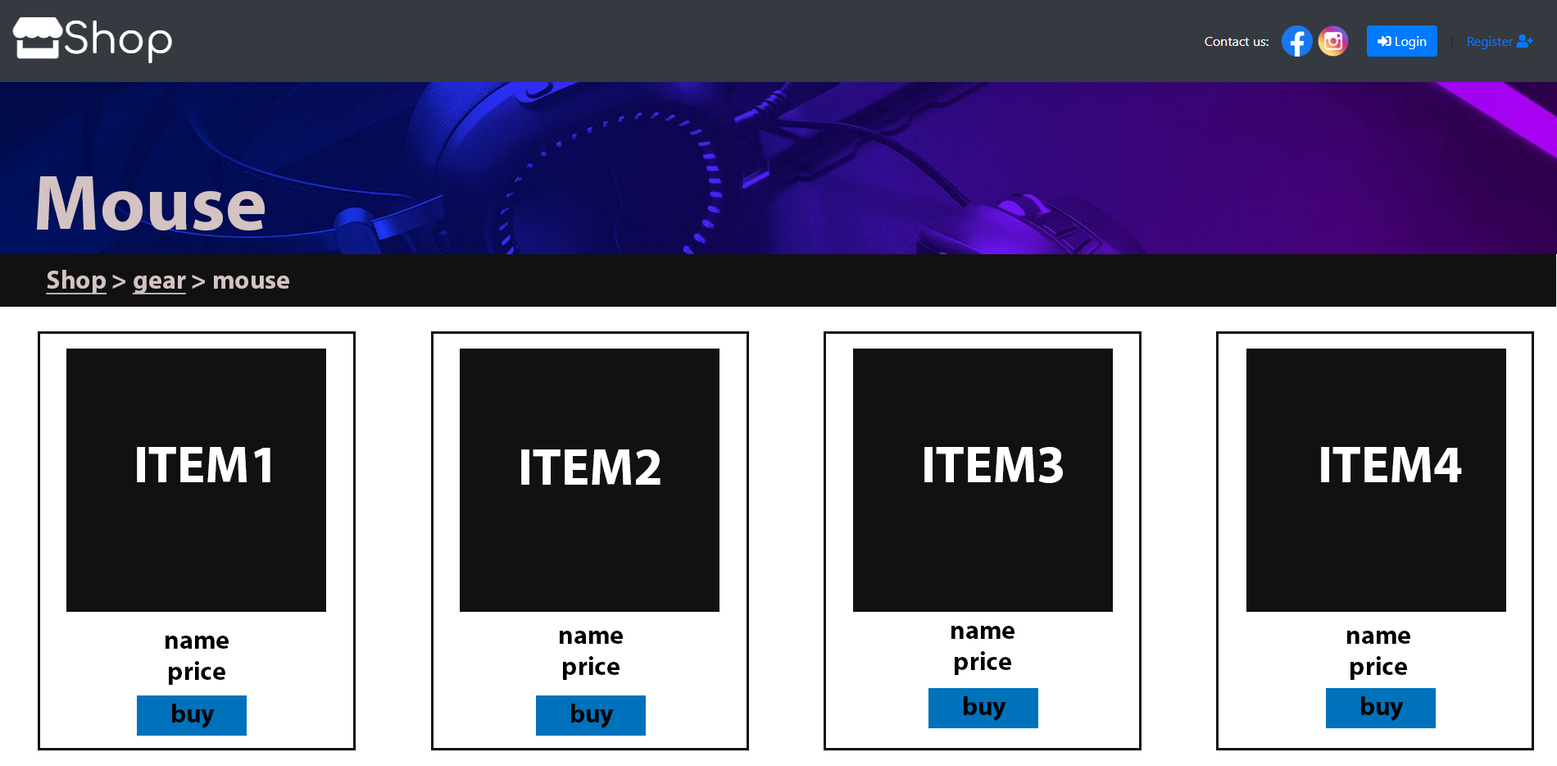
<style>
.page{position:relative;width:1557px;height:766px;background:#ffffff}
.page>*{position:absolute;margin:0}
.t1{font:78.7px "MyriadPro-Bold";color:#d4c3c3}
.t2{font:26.2px "MyriadPro-Bold";color:#d4c3c3}
.t3{font:26.2px "MyriadPro-Bold";color:#d4c3c3;text-decoration:underline}
.t4{font:52.5px "MyriadPro-Bold";color:#ffffff}
.t5{font:26.2px "MyriadPro-Bold";color:#000000}
</style>
<div class="page">
<p class="t1" style="left:37px;top:176px;width:228px;height:54px">Mouse</p>
<p class="t2" style="left:46px;top:270px;width:243px;height:24px"><span class="t3">Shop</span> &gt; <span class="t3">gear</span> &gt; mouse</p>
<p class="t4" style="left:137px;top:447px;width:134px;height:35px">ITEM1</p>
<p class="t4" style="left:521px;top:449px;width:140px;height:35px">ITEM2</p>
<p class="t4" style="left:925px;top:447px;width:138px;height:36px">ITEM3</p>
<p class="t4" style="left:1321px;top:447px;width:141px;height:35px">ITEM4</p>
<p class="t5" style="left:952px;top:625px;width:63px;height:50px;text-align:center">name<br>price</p>
<p class="t5" style="left:166px;top:635px;width:63px;height:49px;text-align:center">name<br>price</p>
<p class="t5" style="left:560px;top:630px;width:63px;height:50px;text-align:center">name<br>price</p>
<p class="t5" style="left:1348px;top:630px;width:63px;height:50px;text-align:center">name<br>price</p>
</div>
